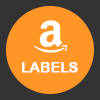
<style>
.page{position:relative;width:100px;height:100px;background:#ff9626}
.page>*{position:absolute;margin:0}
.t1{font:14.5px "ArialRoundedMTBold";color:#ffffff;font-weight:bold;scale:0.96 1}
</style>
<div class="page">
<p class="t1" style="left:22px;top:62px;width:56px;height:11px">LABELS</p>
</div>
